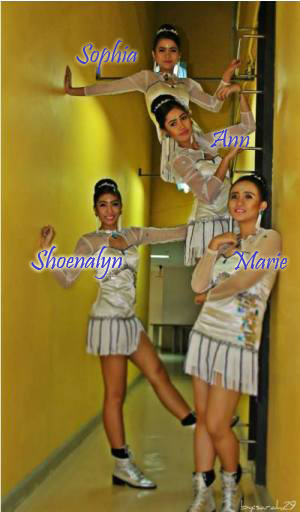
<style>
.page{position:relative;width:300px;height:512px}
.page>*{position:absolute;margin:0}
.t1{font:27px "Pristina-Regular";color:#443dc5}
</style>
<div class="page">
<p class="t1" style="left:76px;top:40px;width:61px;height:34px">Sophia</p>
<p class="t1" style="left:210px;top:129px;width:40px;height:19px">Ann</p>
<p class="t1" style="left:31px;top:246px;width:91px;height:33px">Shoenalyn</p>
<p class="t1" style="left:31px;top:246px;width:91px;height:33px">Shoenalyn</p>
<p class="t1" style="left:233px;top:251px;width:54px;height:19px">Marie</p>
</div>
